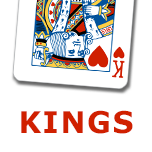
<style>
.page{position:relative;width:152px;height:152px;background:#ffffff}
.page>*{position:absolute;margin:0}
.t1{font:29.8px "Verdana-Bold";letter-spacing:0.05em;color:#d02000}
</style>
<div class="page">
<p class="t1" style="left:21px;top:110px;width:112px;height:24px">KINGS</p>
</div>
